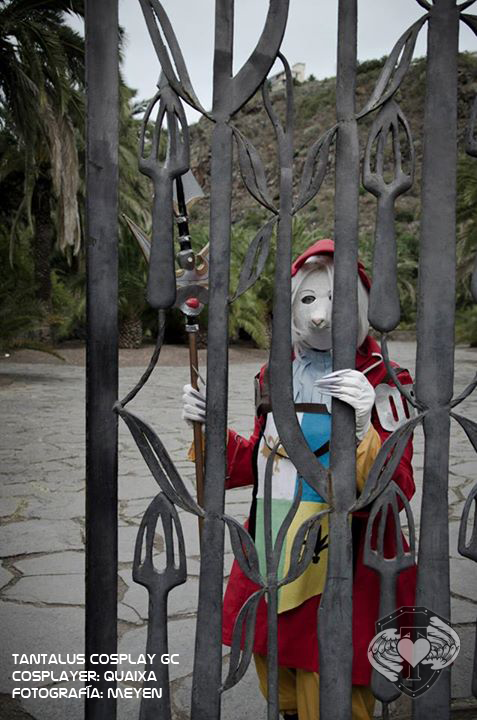
<style>
.page{position:relative;width:477px;height:720px}
.page>*{position:absolute;margin:0}
.t1{font:14px "NasalizationRg-Regular";color:#ffffff}
</style>
<div class="page">
<p class="t1" style="left:12px;top:654px;width:167px;height:44px">tantalus cosplay gc<br>cosplayer: quaixa<br>fotografía: meyen</p>
</div>
